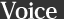
<style>
.page{position:relative;width:64px;height:19px;background:#333333}
.page>*{position:absolute;margin:0}
.t1{font:24px "HeiseiMinStd-W7";color:#ffffff}
</style>
<div class="page">
<p class="t1" style="left:0px;top:1px;width:57px;height:18px">Voice</p>
</div>
